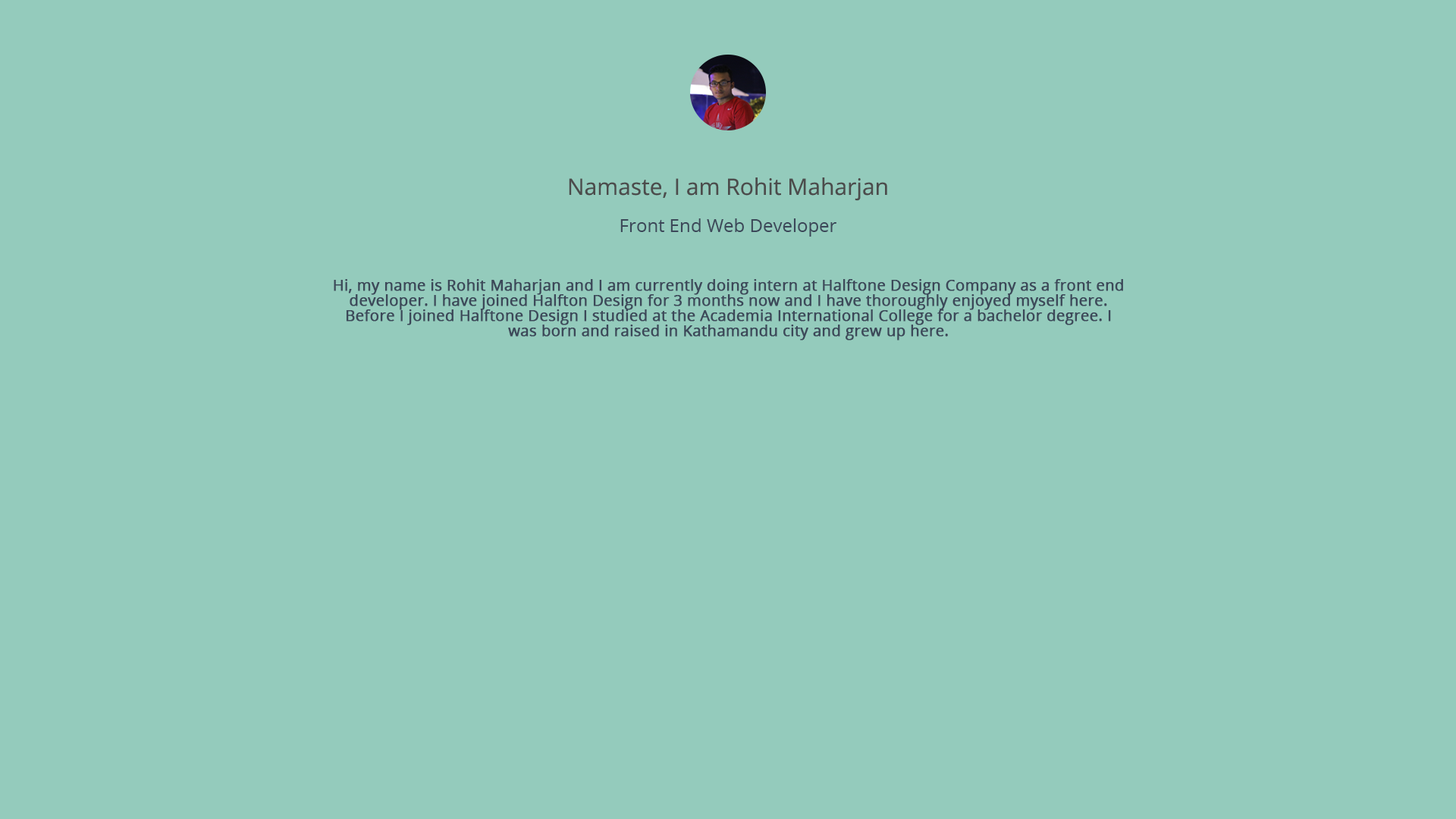
<style>
.page{position:relative;width:1456px;height:819px;background:#94cbbc}
.page>*{position:absolute;margin:0}
.t1{font:22.7px "OpenSans";color:#4c4c4c}
.t2{font:18.2px "OpenSans";color:#3c4859}
.t3{font:15.2px/15.2px "OpenSans";letter-spacing:0.001em;color:#3c4859;font-weight:bold}
</style>
<div class="page">
<p class="t1" style="left:569px;top:177px;width:318px;height:24px">Namaste, I am Rohit Maharjan</p>
<p class="t2" style="left:620px;top:218px;width:216px;height:19px">Front End Web Developer</p>
<p class="t3" style="left:334px;top:279px;width:789px;height:61px;text-align:center">Hi, my name is Rohit Maharjan and I am currently doing intern at Halftone Design Company as a front end developer. I have joined Halfton Design for 3 months now and I have thoroughly enjoyed myself here. Before I joined Halftone Design I studied at the Academia International College for a bachelor degree. I was born and raised in Kathamandu city and grew up here.</p>
</div>
